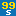
<style>
.page{position:relative;width:16px;height:16px;background:#0e71b4}
.page>*{position:absolute;margin:0}
.t1{font:10px "DokChampa";color:#ffd800;font-weight:bold}
.t2{font:9px "ArialMT";color:#ffffff;font-weight:bold}
</style>
<div class="page">
<p class="t1" style="left:2px;top:2px;width:13px;height:7px">99</p>
<p class="t2" style="left:6px;top:10px;width:5px;height:5px">s</p>
</div>
